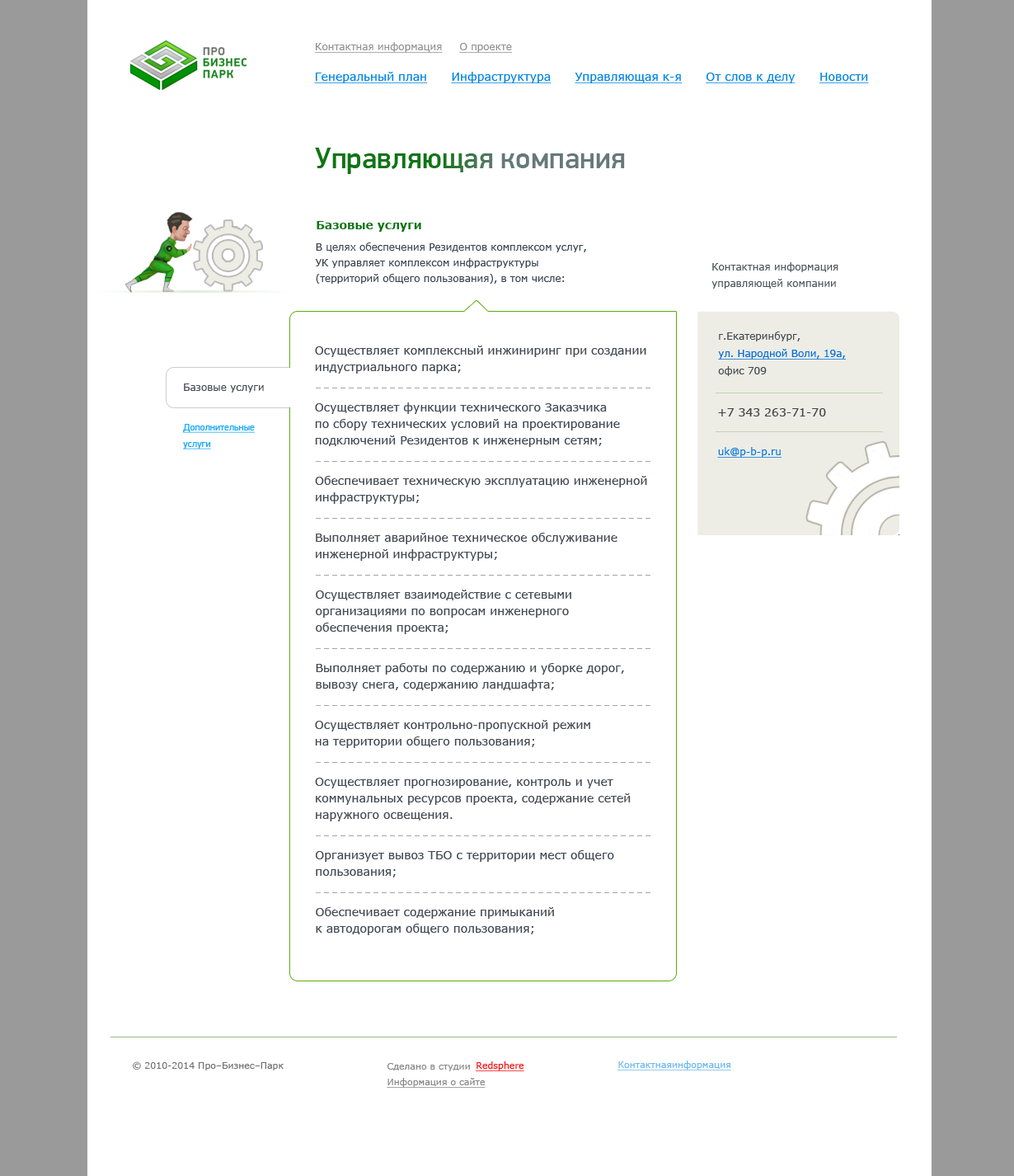
<style>
.page{position:relative;width:1014px;height:1176px;background:#ffffff}
.page>*{position:absolute;margin:0}
.t1{font:9.9px "Verdana";color:#8f8f8f;text-decoration:underline}
.t2{font:11.5px "Verdana";color:#0084e2;text-decoration:underline}
.t3{font:11.5px "Verdana";color:#0084e2}
.t4{font:29.7px "PFDinDisplayPro-Medium"}
.t5{font:11.5px "Verdana-Bold";color:#107415}
.t6{font:9.9px/15.7px "Verdana";color:#3b454e}
.t7{font:9.9px/16.5px "Verdana";color:#4b565a}
.t8{font:9.9px/17.3px "Verdana";color:#006ddd;text-decoration:underline}
.t9{font:9.9px/17.3px "Verdana";color:#5f5f5f}
.t10{font:9.9px/17.3px "Verdana";color:#434a52}
.t11{font:11.5px/16.5px "Verdana";color:#434a52}
.t12{font:9.9px "Verdana";color:#434a52}
.t13{font:11.5px "Verdana";color:#444444}
.t14{font:9.9px/16.5px "PFDinDisplayPro-Regular";color:#0ea6f4;text-decoration:underline}
.t15{font:9.9px "Verdana";color:#0074e1;text-decoration:underline}
.t16{font:9.1px "Verdana";color:#707070}
.t17{font:9.1px "Verdana";color:#fa1010;text-decoration:underline}
.t18{font:9.1px "Verdana";color:#888888}
.t19{font:9.1px "Verdana";color:#6bb8ee;text-decoration:underline}
.t20{font:9.1px "Verdana";color:#888888;text-decoration:underline}
</style>
<div class="page">
<p class="t1" style="left:315px;top:42px;width:197px;height:11px">Контактная информация     О проекте</p>
<p class="t2" style="left:314px;top:72px;width:555px;height:11px"><span class="t3">      </span>Генеральный план      Инфраструктура      Управляющая к-я      От слов к делу      Новости</p>
<p class="t4" style="left:315px;top:148px;width:310px;height:26px">Управляющая компания</p>
<p class="t5" style="left:317px;top:221px;width:104px;height:11px">Базовые услуги</p>
<p class="t6" style="left:315px;top:242px;width:271px;height:42px">В целях обеспечения Резидентов комплексом услуг, <br>УК управляет комплексом инфраструктуры <br>(территорий общего пользования), в том числе:</p>
<p class="t7" style="left:712px;top:262px;width:127px;height:27px">Контактная информация<br>управляющей компании</p>
<p class="t8" style="left:718px;top:331px;width:128px;height:45px"><span class="t9"><br></span><span class="t10">г.Екатеринбург,<br></span>ул. Народной Воли, 19а, <br><span class="t10">офис 709</span></p>
<p class="t11" style="left:315px;top:345px;width:331px;height:29px">Осуществляет комплексный инжиниринг при создании <br>индустриального парка;</p>
<p class="t12" style="left:184px;top:383px;width:80px;height:9px">Базовые услуги</p>
<p class="t11" style="left:315px;top:402px;width:305px;height:45px">Осуществляет функции технического Заказчика <br>по сбору технических условий на проектирование <br>подключений Резидентов к инженерным сетям;</p>
<p class="t13" style="left:718px;top:408px;width:108px;height:8px">+7 343 263-71-70</p>
<p class="t14" style="left:183px;top:424px;width:72px;height:25px">Дополнительные <br>услуги</p>
<p class="t15" style="left:717px;top:447px;width:65px;height:11px">uk@p-b-p.ru</p>
<p class="t11" style="left:315px;top:476px;width:332px;height:28px">Обеспечивает техническую эксплуатацию инженерной <br>инфраструктуры;</p>
<p class="t11" style="left:316px;top:533px;width:302px;height:28px">Выполняет аварийное техническое обслуживание <br>инженерной инфраструктуры;</p>
<p class="t11" style="left:316px;top:590px;width:255px;height:44px">Осуществляет взаимодействие с сетевыми <br>организациями по вопросам инженерного <br>обеспечения проекта;</p>
<p class="t11" style="left:316px;top:663px;width:308px;height:28px">Выполняет работы по содержанию и уборке дорог, <br>вывозу снега, содержанию ландшафта;</p>
<p class="t11" style="left:315px;top:720px;width:275px;height:28px">Осуществляет контрольно-пропускной режим <br>на территории общего пользования;</p>
<p class="t11" style="left:315px;top:778px;width:316px;height:43px">Осуществляет прогнозирование, контроль и учет <br>коммунальных ресурсов проекта, содержание сетей <br>наружного освещения.</p>
<p class="t11" style="left:316px;top:850px;width:298px;height:27px">Организует вывоз ТБО с территории мест общего <br>пользования;</p>
<p class="t11" style="left:316px;top:907px;width:238px;height:28px">Обеспечивает содержание примыканий <br>к автодорогам общего пользования;</p>
<p class="t16" style="left:133px;top:1061px;width:151px;height:9px">© 2010-2014 Про–Бизнес–Парк</p>
<p class="t17" style="left:476px;top:1061px;width:48px;height:10px"><span class="t18">         </span>Redsphere</p>
<p class="t19" style="left:618px;top:1060px;width:113px;height:10px">Контактнаяинформация</p>
<p class="t18" style="left:388px;top:1063px;width:82px;height:8px">Сделано в студии</p>
<p class="t20" style="left:387px;top:1078px;width:99px;height:10px">Информация о сайте</p>
</div>
